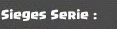
<style>
.page{position:relative;width:117px;height:29px}
.page>*{position:absolute;margin:0}
.t1{font:10px "Supercell-Magic";color:#fafafa}
</style>
<div class="page">
<p class="t1" style="left:1px;top:9px;width:96px;height:12px">Sieges Serie :</p>
</div>
